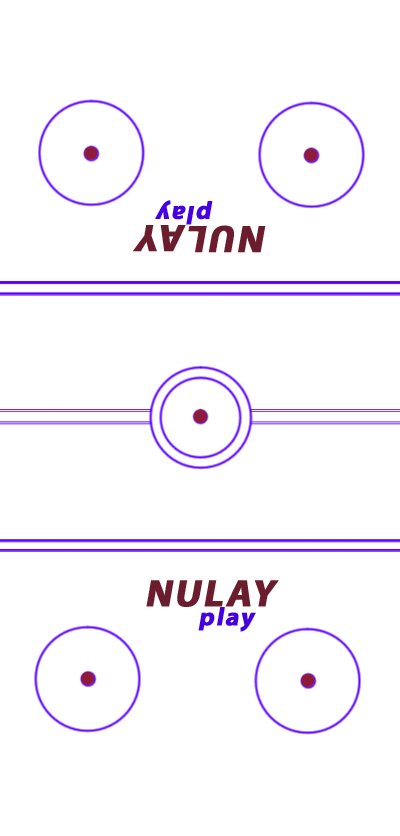
<style>
.page{position:relative;width:400px;height:836px;background:#ffffff}
.page>*{position:absolute;margin:0}
.t1{font:25.5px "MyriadPro-Bold";letter-spacing:0.05em;color:#4500e2;font-weight:bold;font-style:italic}
.t2{font:38.3px "MyriadPro-Bold";letter-spacing:0.05em;color:#6b1d2e;font-weight:bold;font-style:italic}
</style>
<div class="page">
<p class="t1" style="left:155px;top:200px;width:58px;height:25px;rotate:-180deg">play</p>
<p class="t2" style="left:133px;top:225px;width:133px;height:28px;rotate:-180deg">NULAY</p>
<p class="t2" style="left:146px;top:580px;width:133px;height:27px">NULAY</p>
<p class="t1" style="left:198px;top:607px;width:58px;height:25px">play</p>
</div>
